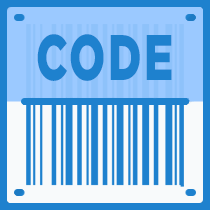
<style>
.page{position:relative;width:210px;height:210px;background:#1e81ce}
.page>*{position:absolute;margin:0}
.t1{font:64.2px "Gotham-Black";letter-spacing:0.05em;color:#1e81ce;scale:0.68 1}
</style>
<div class="page">
<p class="t1" style="left:37px;top:34px;width:135px;height:47px">CODE</p>
</div>
